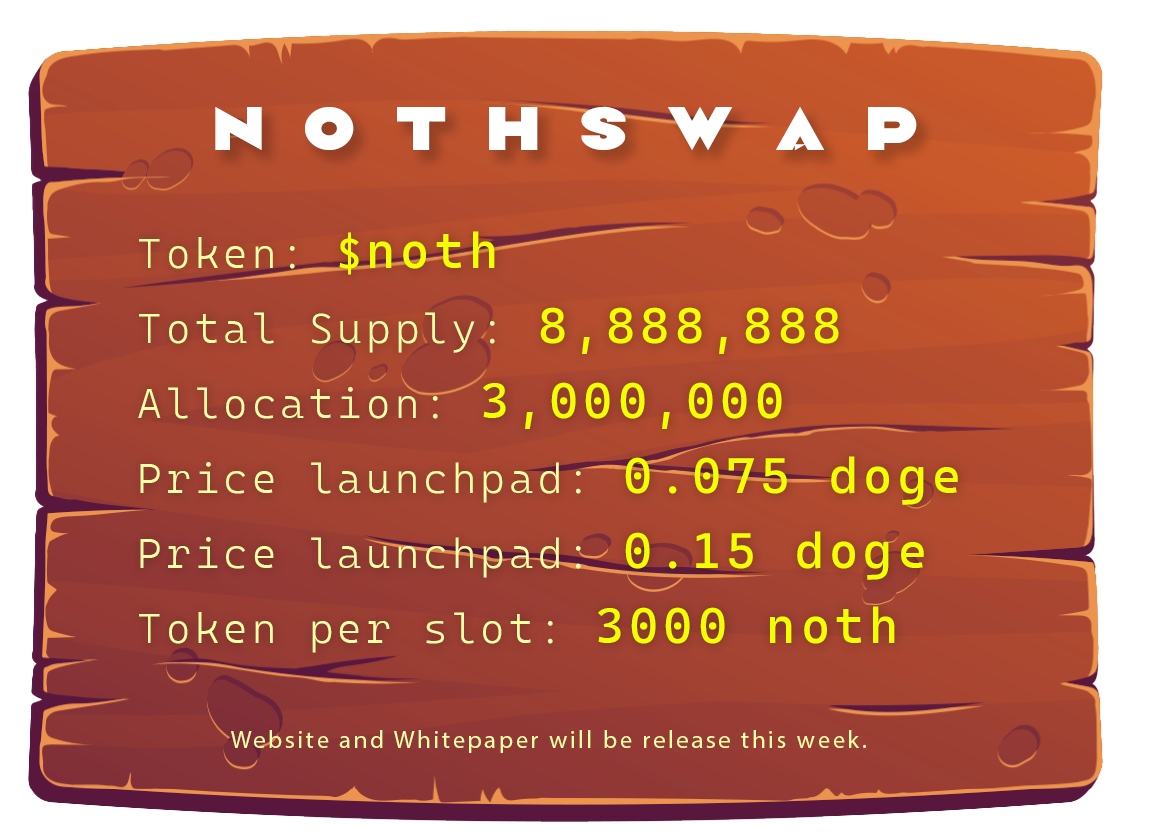
<style>
.page{position:relative;width:1153px;height:836px}
.page>*{position:absolute;margin:0}
.t1{font:75px "DFVN-Camar-Regular";letter-spacing:0.1em;color:#ffffff}
.t2{font:41.7px/75px "CascadiaMonoRoman-Light";letter-spacing:0.1em;color:#fbffa7}
.t3{font:41.7px/75px "CascadiaMono-Regular";letter-spacing:0.1em;color:#f2ff00}
.t4{font:50px/75px "CascadiaMono-Regular";letter-spacing:0.1em;color:#f2ff00}
.t5{font:25px "MyriadPro-Regular";letter-spacing:0.1em;color:#fbffa7}
</style>
<div class="page">
<p class="t1" style="left:215px;top:106px;width:702px;height:45px">N O T H S W A P</p>
<p class="t2" style="left:138px;top:231px;width:820px;height:422px">Token: <span class="t3">$</span><span class="t4">noth<br></span>Total Supply: <span class="t4">8,888,888<br></span>Allocation: <span class="t4">3,000,000<br></span>Price launchpad: <span class="t4">0.075 doge<br></span>Price launchpad: <span class="t4">0.15 doge<br></span>Token per slot: <span class="t4">3000 noth</span></p>
<p class="t5" style="left:231px;top:730px;width:635px;height:23px">Website and Whitepaper will be release this week.</p>
</div>
